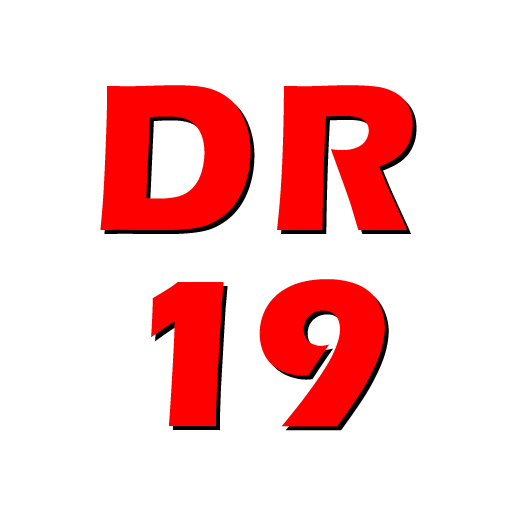
<style>
.page{position:relative;width:512px;height:512px;background:#ffffff}
.page>*{position:absolute;margin:0}
.t1{font:216px/196px "ErasITC-Bold";letter-spacing:0.06em;color:#ff0000}
</style>
<div class="page">
<p class="t1" style="left:100px;top:85px;width:313px;height:342px;text-align:center">DR<br>19</p>
<p class="t1" style="left:104px;top:89px;width:313px;height:342px;text-align:center">DR<br>19</p>
</div>
